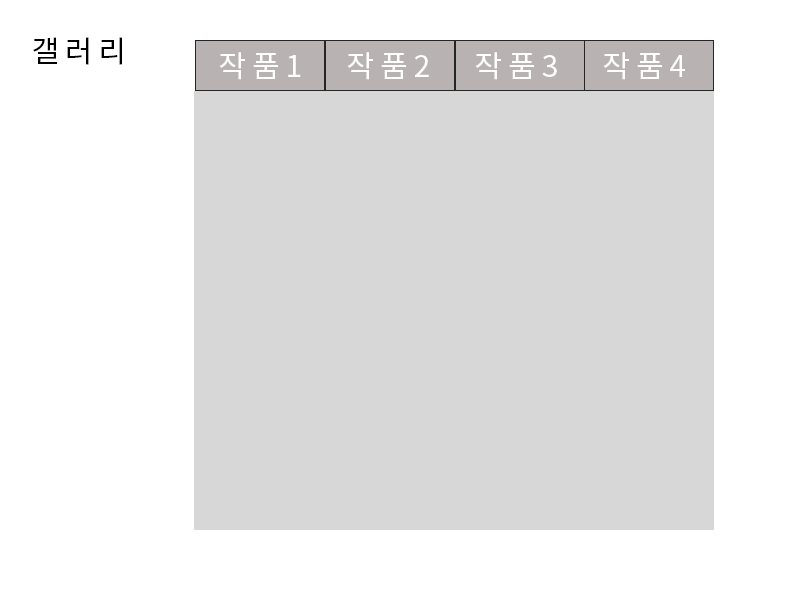
<style>
.page{position:relative;width:800px;height:600px;background:#ffffff}
.page>*{position:absolute;margin:0}
.t1{font:30px "NotoSansCJKkr-Regular";letter-spacing:0.2em;color:#000000}
.t2{font:30px "NotoSansCJKkr-Regular";letter-spacing:0.2em;color:#ffffff}
</style>
<div class="page">
<p class="t1" style="left:33px;top:37px;width:89px;height:28px">갤러리</p>
<p class="t2" style="left:219px;top:52px;width:466px;height:28px">작품1   작품2   작품3   작품4</p>
</div>
